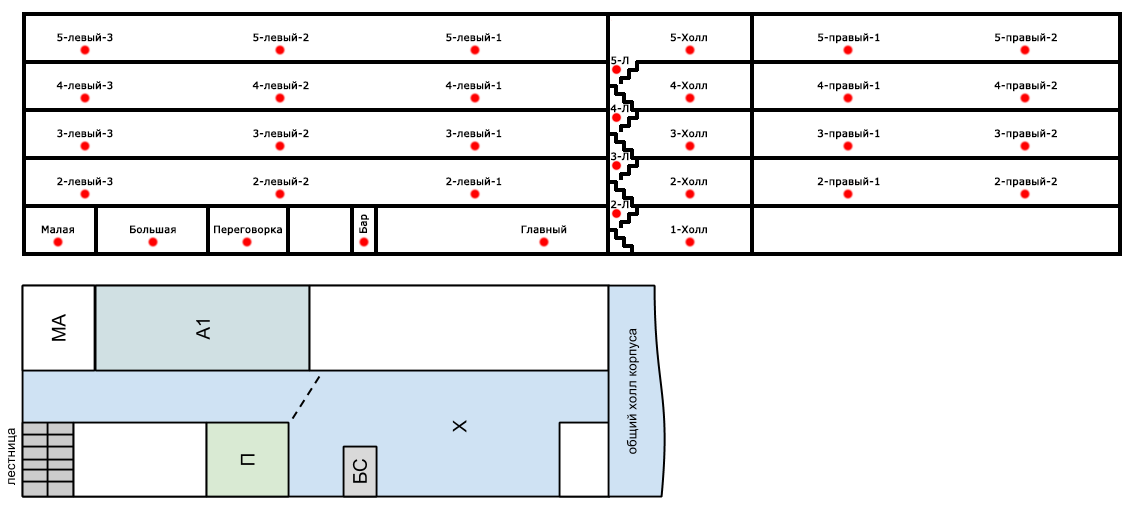
<style>
.page{position:relative;width:1134px;height:508px;background:#ffffff}
.page>*{position:absolute;margin:0}
.t1{font:10px "Verdana";color:#000000;font-weight:bold}
</style>
<div class="page">
<p class="t1" style="left:57px;top:33px;width:56px;height:9px">5-левый-3</p>
<p class="t1" style="left:253px;top:33px;width:56px;height:9px">5-левый-2</p>
<p class="t1" style="left:446px;top:33px;width:56px;height:9px">5-левый-1</p>
<p class="t1" style="left:670px;top:33px;width:37px;height:9px">5-Холл</p>
<p class="t1" style="left:818px;top:33px;width:62px;height:11px">5-правый-1</p>
<p class="t1" style="left:995px;top:33px;width:62px;height:11px">5-правый-2</p>
<p class="t1" style="left:611px;top:56px;width:18px;height:9px">5-Л</p>
<p class="t1" style="left:56px;top:81px;width:57px;height:9px">4-левый-3</p>
<p class="t1" style="left:252px;top:81px;width:57px;height:9px">4-левый-2</p>
<p class="t1" style="left:445px;top:81px;width:57px;height:9px">4-левый-1</p>
<p class="t1" style="left:670px;top:81px;width:37px;height:9px">4-Холл</p>
<p class="t1" style="left:817px;top:81px;width:63px;height:11px">4-правый-1</p>
<p class="t1" style="left:994px;top:81px;width:63px;height:11px">4-правый-2</p>
<p class="t1" style="left:610px;top:104px;width:19px;height:9px">4-Л</p>
<p class="t1" style="left:57px;top:129px;width:56px;height:9px">3-левый-3</p>
<p class="t1" style="left:253px;top:129px;width:56px;height:9px">3-левый-2</p>
<p class="t1" style="left:446px;top:129px;width:56px;height:9px">3-левый-1</p>
<p class="t1" style="left:670px;top:129px;width:37px;height:9px">3-Холл</p>
<p class="t1" style="left:817px;top:129px;width:63px;height:11px">3-правый-1</p>
<p class="t1" style="left:994px;top:129px;width:63px;height:11px">3-правый-2</p>
<p class="t1" style="left:611px;top:152px;width:18px;height:9px">3-Л</p>
<p class="t1" style="left:57px;top:177px;width:56px;height:9px">2-левый-3</p>
<p class="t1" style="left:253px;top:177px;width:56px;height:9px">2-левый-2</p>
<p class="t1" style="left:446px;top:177px;width:56px;height:9px">2-левый-1</p>
<p class="t1" style="left:670px;top:177px;width:37px;height:9px">2-Холл</p>
<p class="t1" style="left:817px;top:177px;width:63px;height:11px">2-правый-1</p>
<p class="t1" style="left:994px;top:177px;width:63px;height:11px">2-правый-2</p>
<p class="t1" style="left:611px;top:200px;width:18px;height:9px">2-Л</p>
<p class="t1" style="left:359px;top:214px;width:10px;height:19px;rotate:-90deg">Бар</p>
<p class="t1" style="left:41px;top:225px;width:33px;height:9px">Малая</p>
<p class="t1" style="left:130px;top:225px;width:46px;height:9px">Большая</p>
<p class="t1" style="left:214px;top:225px;width:68px;height:11px">Переговорка</p>
<p class="t1" style="left:521px;top:225px;width:46px;height:9px">Главный</p>
<p class="t1" style="left:671px;top:225px;width:36px;height:9px">1-Холл</p>
</div>
